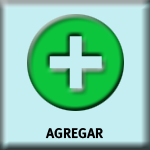
<style>
.page{position:relative;width:150px;height:150px;background:#c4eef1}
.page>*{position:absolute;margin:0}
.t1{font:14px "MetaBoldLF-Roman";color:#000000}
</style>
<div class="page">
<p class="t1" style="left:45px;top:128px;width:58px;height:11px">AGREGAR</p>
</div>
